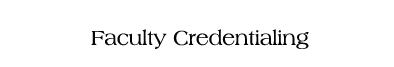
<style>
.page{position:relative;width:394px;height:67px;background:#ffffff}
.page>*{position:absolute;margin:0}
.t1{font:21px "AmericanaBT-Roman";color:#030303}
</style>
<div class="page">
<p class="t1" style="left:91px;top:29px;width:218px;height:20px">Faculty Credentialing</p>
</div>
